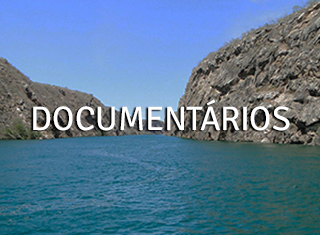
<style>
.page{position:relative;width:320px;height:235px}
.page>*{position:absolute;margin:0}
.t1{font:34px "Signika-Regular";letter-spacing:-0.01em;color:#ffffff}
</style>
<div class="page">
<p class="t1" style="left:33px;top:99px;width:257px;height:32px">DOCUMENTÁRIOS</p>
</div>
